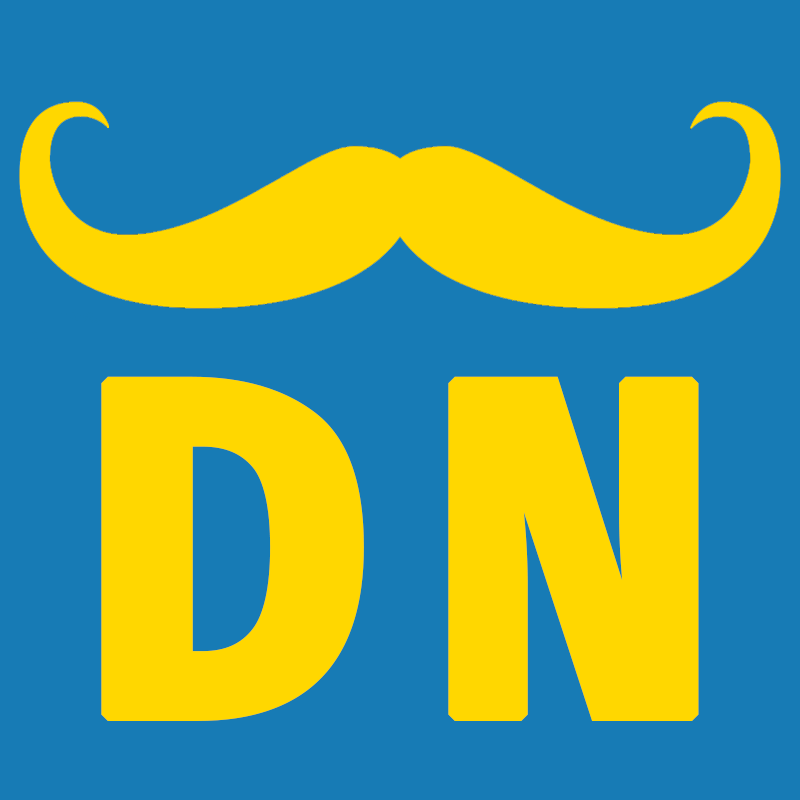
<style>
.page{position:relative;width:800px;height:800px;background:#177bb5}
.page>*{position:absolute;margin:0}
.t1{font:477.8px "FiraCodeiScript-Bold";letter-spacing:0.1em;color:#ffd700;font-weight:bold}
</style>
<div class="page">
<p class="t1" style="left:101px;top:376px;width:598px;height:345px">DN</p>
</div>
